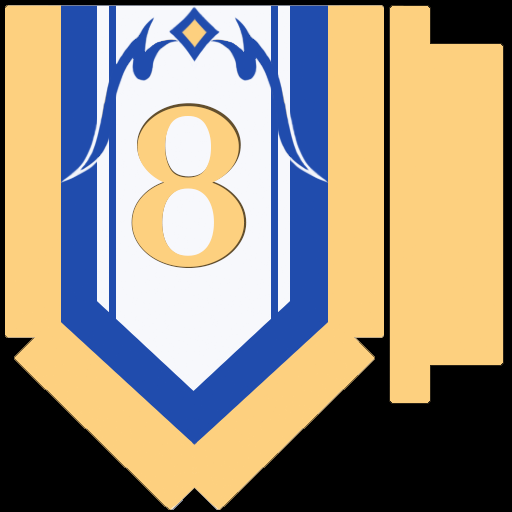
<style>
.page{position:relative;width:512px;height:512px;background:#fdd07f}
.page>*{position:absolute;margin:0}
.t1{font:200px "HaanSollipB";color:#fdd07f}
.t2{font:195px "HaanSollipB";color:#fdd07f}
</style>
<div class="page">
<p class="t1" style="left:131px;top:103px;width:116px;height:165px">8</p>
<p class="t2" style="left:132px;top:106px;width:113px;height:161px">8</p>
</div>
